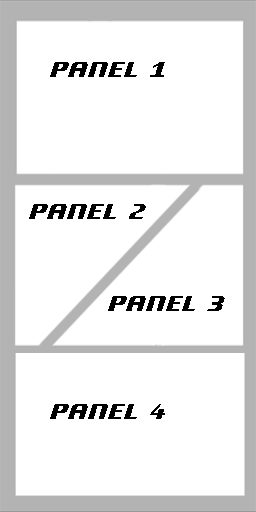
<style>
.page{position:relative;width:256px;height:512px;background:#ffffff}
.page>*{position:absolute;margin:0}
.t1{font:34px "Motorwerk";color:#000000}
</style>
<div class="page">
<p class="t1" style="left:50px;top:62px;width:115px;height:15px">Panel 1</p>
<p class="t1" style="left:29px;top:204px;width:117px;height:15px">Panel 2</p>
<p class="t1" style="left:108px;top:296px;width:117px;height:15px">Panel 3</p>
<p class="t1" style="left:50px;top:404px;width:115px;height:15px">Panel 4</p>
</div>
